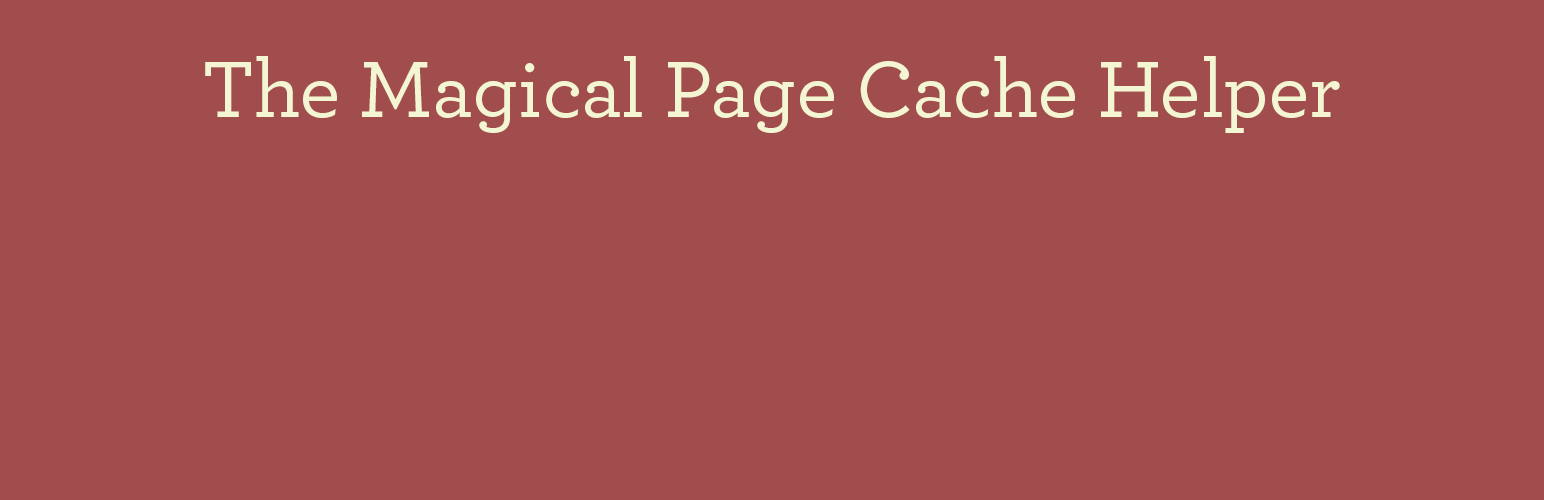
<style>
.page{position:relative;width:1544px;height:500px;background:#a24d4d}
.page>*{position:absolute;margin:0}
.t1{font:83.3px "Archer-Medium";color:#f4f6d3}
</style>
<div class="page">
<p class="t1" style="left:205px;top:56px;width:1135px;height:77px">The Magical Page Cache Helper</p>
</div>
